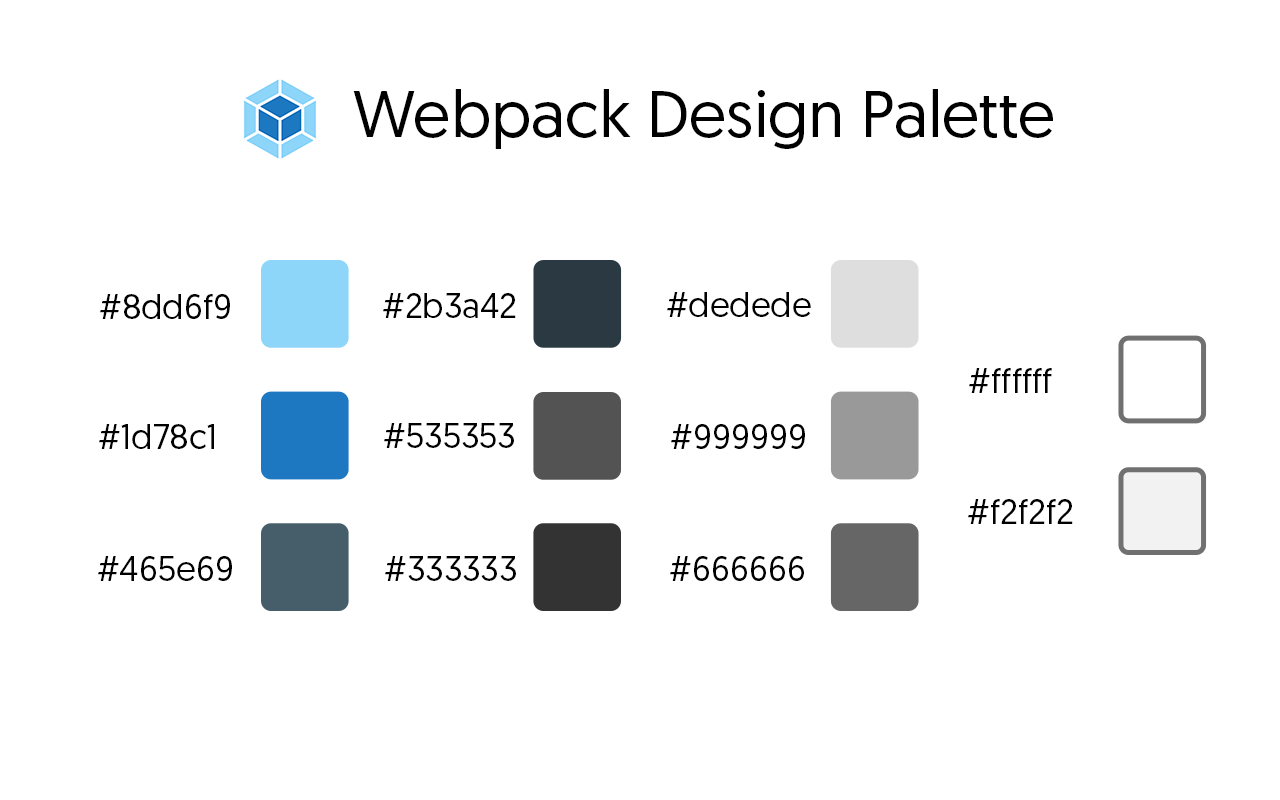
<style>
.page{position:relative;width:1280px;height:800px;background:#ffffff}
.page>*{position:absolute;margin:0}
.t1{font:65.9px "Geomanist";color:#000000}
.t2{font:34.9px "Geomanist";color:#000000}
</style>
<div class="page">
<p class="t1" style="left:353px;top:89px;width:700px;height:60px">Webpack Design Palette</p>
<p class="t2" style="left:100px;top:294px;width:130px;height:25px">#8dd6f9</p>
<p class="t2" style="left:383px;top:293px;width:133px;height:25px">#2b3a42</p>
<p class="t2" style="left:667px;top:292px;width:144px;height:25px">#dedede</p>
<p class="t2" style="left:969px;top:368px;width:83px;height:25px">#ffffff</p>
<p class="t2" style="left:99px;top:424px;width:115px;height:25px">#1d78c1</p>
<p class="t2" style="left:384px;top:423px;width:130px;height:25px">#535353</p>
<p class="t2" style="left:671px;top:424px;width:134px;height:25px">#999999</p>
<p class="t2" style="left:968px;top:499px;width:105px;height:25px">#f2f2f2</p>
<p class="t2" style="left:98px;top:556px;width:134px;height:25px">#465e69</p>
<p class="t2" style="left:385px;top:556px;width:131px;height:25px">#333333</p>
<p class="t2" style="left:670px;top:556px;width:134px;height:25px">#666666</p>
</div>
